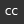
<style>
.page{position:relative;width:24px;height:24px;background:#333333}
.page>*{position:absolute;margin:0}
.t1{font:10px "OpenSans";color:#ffffff}
</style>
<div class="page">
<p class="t1" style="left:5px;top:8px;width:13px;height:7px">CC</p>
</div>
